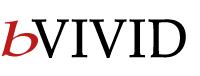
<style>
.page{position:relative;width:200px;height:76px;background:#ffffff}
.page>*{position:absolute;margin:0}
.t1{font:48.6px "BookAntiqua";color:#bd1a1a;font-style:italic;scale:1.5 1}
.t2{font:53.6px "BookAntiqua";color:#000000;font-weight:bold;scale:0.97 1}
</style>
<div class="page">
<p class="t1" style="left:1px;top:20px;width:37px;height:37px">b</p>
<p class="t2" style="left:31px;top:19px;width:155px;height:39px">VIVID</p>
</div>
